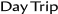
<style>
.page{position:relative;width:58px;height:14px;background:#ffffff}
.page>*{position:absolute;margin:0}
.t1{font:13.9px "Amira-Roman";letter-spacing:-0.01em;color:#000000;scale:1.25 1}
</style>
<div class="page">
<p class="t1" style="left:1px;top:1px;width:57px;height:14px;opacity:0.96">Day Trip</p>
</div>
